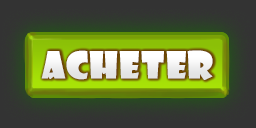
<style>
.page{position:relative;width:256px;height:128px}
.page>*{position:absolute;margin:0}
.t1{font:36px "ShowcardGothic-Reg";letter-spacing:0.025em;color:#ffffff;font-weight:bold}
</style>
<div class="page">
<p class="t1" style="left:41px;top:50px;width:172px;height:30px">ACHETER</p>
</div>
